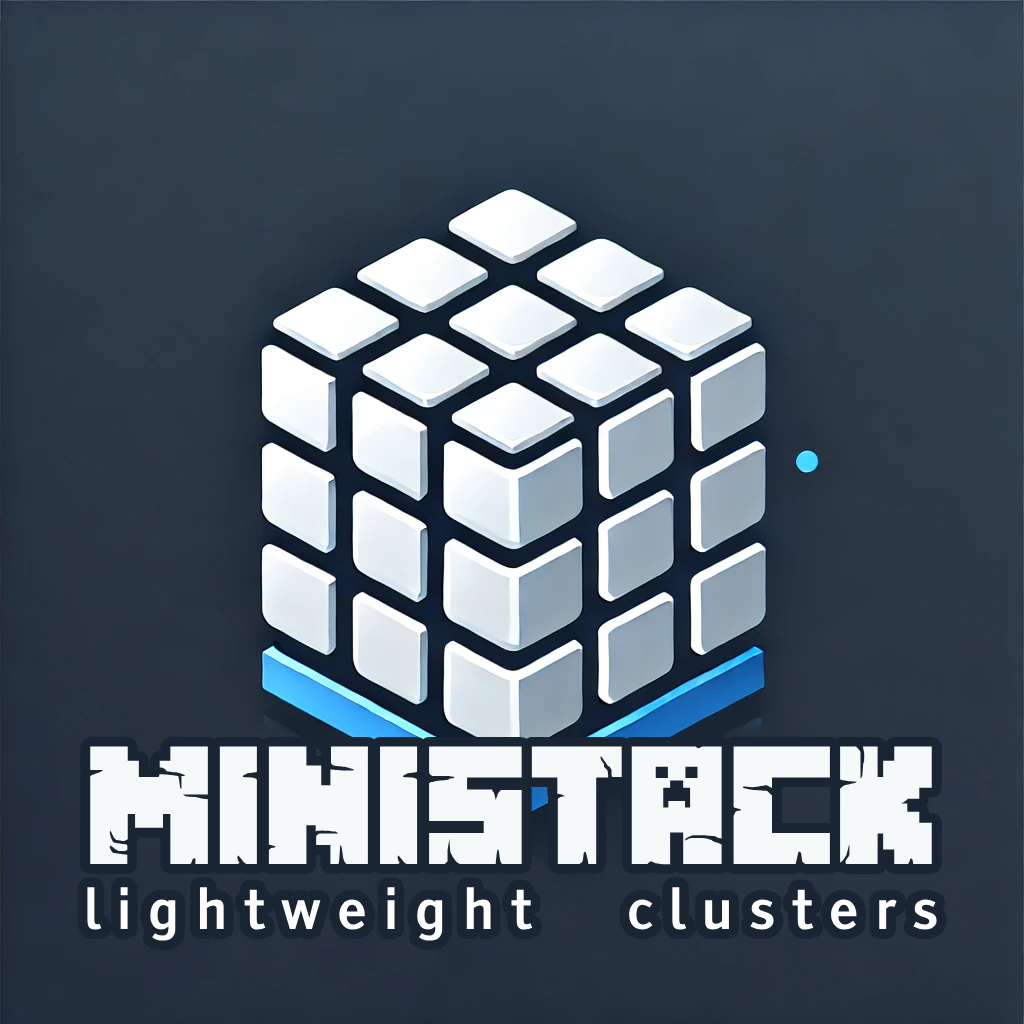
<style>
.page{position:relative;width:1024px;height:1024px}
.page>*{position:absolute;margin:0}
.t1{font:54px "TiresiasInfofont";color:#fefefe}
.t2{font:150px "MinecrafterAlt";color:#f5f9fa}
</style>
<div class="page">
<p class="t1" style="left:87px;top:746px;width:850px;height:195px;text-align:center"><span class="t2">ministack<br></span>l i g h t w e i g h t      c l u s t e r s</p>
</div>
